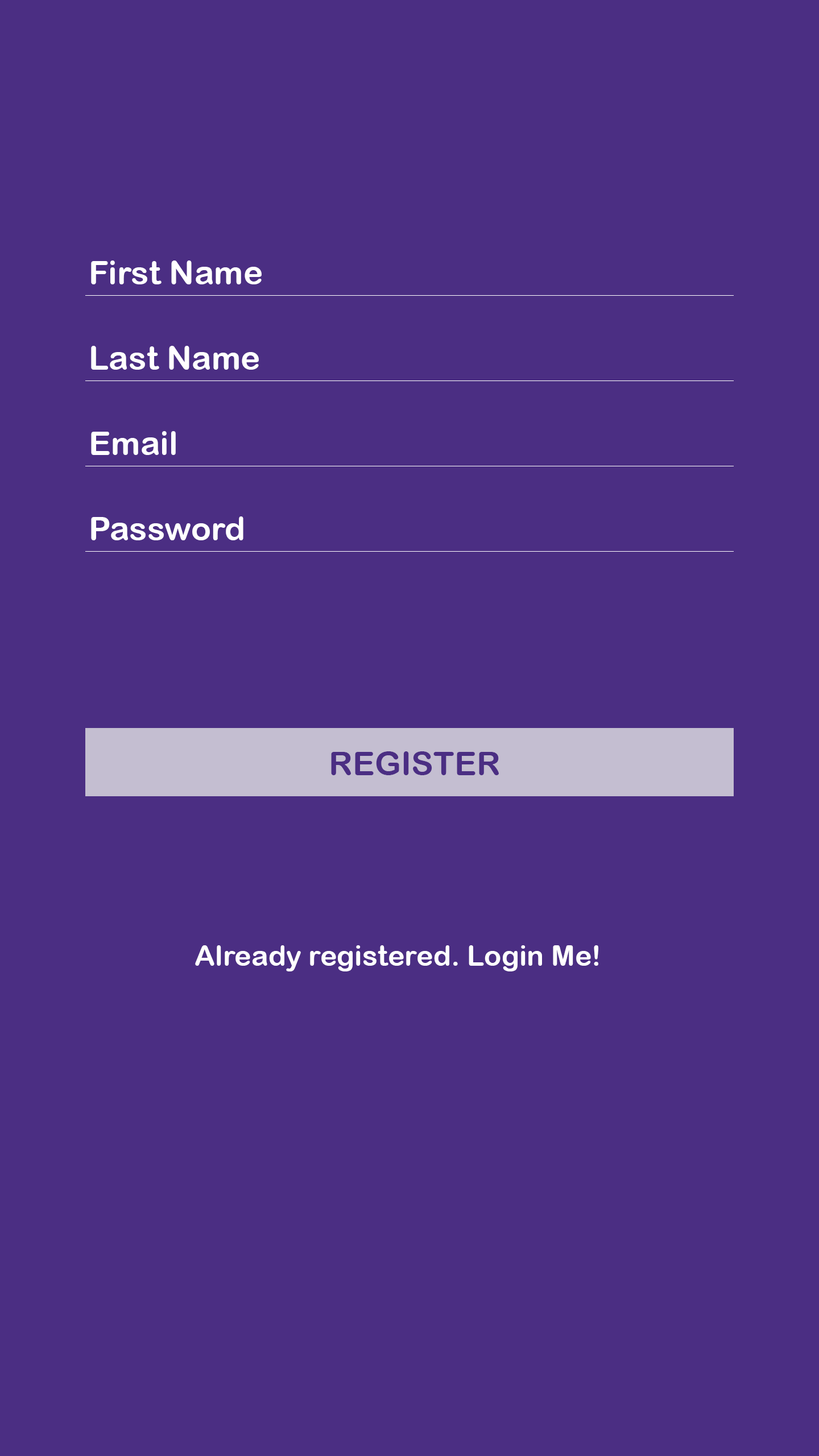
<style>
.page{position:relative;width:819px;height:1456px;background:#4b2e83}
.page>*{position:absolute;margin:0}
.t1{font:33.2px "ArialRoundedMTBold";color:#ffffff}
.t2{font:33.2px "ArialRoundedMTBold";color:#4b2e83}
.t3{font:28.4px "ArialRoundedMTBold";color:#ffffff}
</style>
<div class="page">
<p class="t1" style="left:91px;top:260px;width:171px;height:24px">First Name</p>
<p class="t1" style="left:91px;top:346px;width:168px;height:24px">Last Name</p>
<p class="t1" style="left:91px;top:431px;width:85px;height:24px">Email</p>
<p class="t1" style="left:91px;top:516px;width:152px;height:24px">Password</p>
<p class="t2" style="left:331px;top:751px;width:168px;height:24px">REGISTER</p>
<p class="t3" style="left:195px;top:945px;width:403px;height:26px">Already registered. Login Me!</p>
</div>
